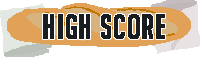
<style>
.page{position:relative;width:200px;height:57px;background:#ffffff}
.page>*{position:absolute;margin:0}
.t1{font:33.3px "BigNoodleTitling";letter-spacing:0.02em;color:#1a1d1f;font-weight:bold;scale:0.97 1}
</style>
<div class="page">
<p class="t1" style="left:43px;top:14px;width:122px;height:25px">High Score</p>
</div>
